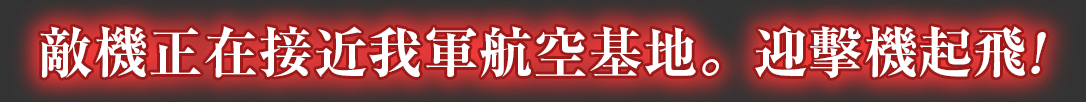
<style>
.page{position:relative;width:1086px;height:102px}
.page>*{position:absolute;margin:0}
.t1{font:55px "RyuminPr6N-ExBold";color:#ffffff}
.t2{font:55px "RyuminPr6N-ExBold";color:#ffffff;font-style:italic}
</style>
<div class="page">
<p class="t1" style="left:40px;top:25px;width:1006px;height:53px">敵機正在接近我軍航空基地<span class="t2">。</span>迎擊機起飛<span class="t2">!</span></p>
</div>
